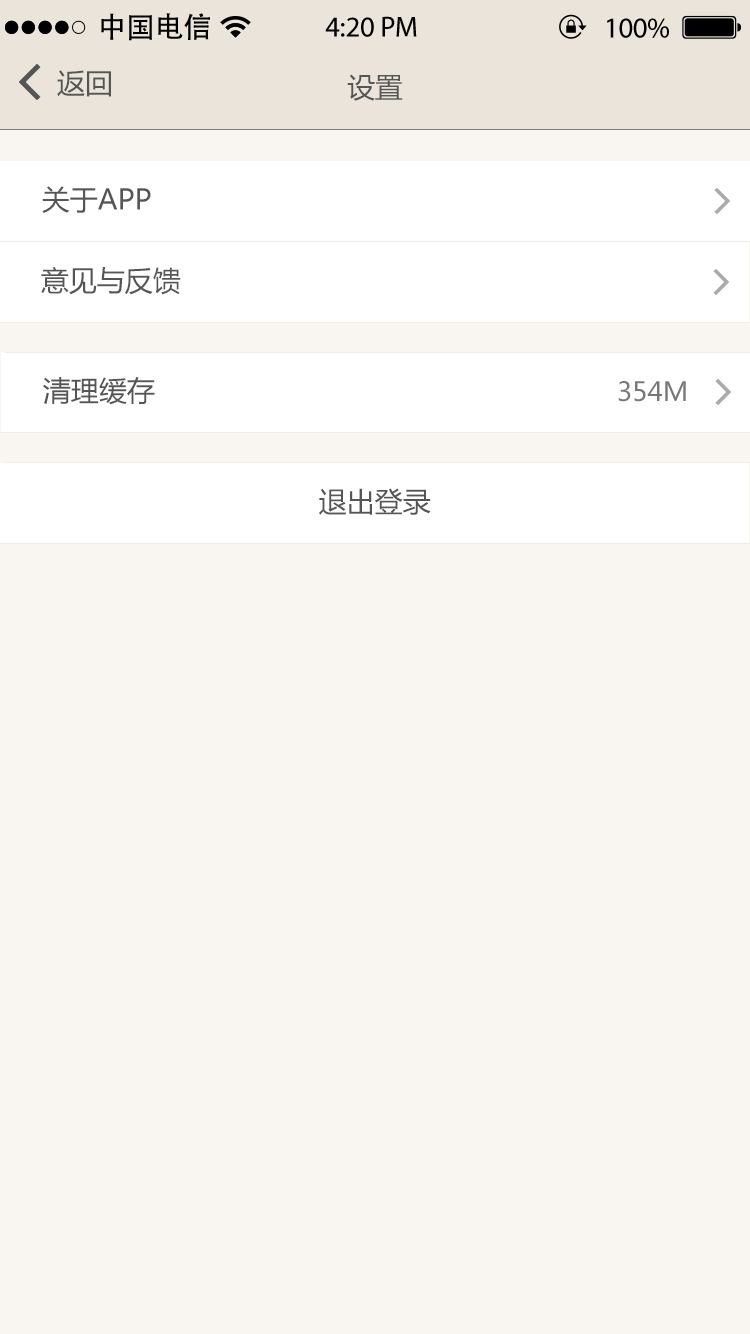
<style>
.page{position:relative;width:750px;height:1334px;background:#f9f5f1}
.page>*{position:absolute;margin:0}
.t1{font:28.8px "AdobeHeitiStd-Regular";color:#000000}
.t2{font:28.8px "MyriadPro-Regular";color:#000000}
.t3{font:28px "MicrosoftYaHei";color:#555555}
.t4{font:26px "MicrosoftYaHei";color:#777777}
</style>
<div class="page">
<p class="t1" style="left:101px;top:13px;width:109px;height:28px">中国电信</p>
<p class="t2" style="left:325px;top:16px;width:92px;height:21px">4:20 PM</p>
<p class="t2" style="left:607px;top:18px;width:62px;height:20px">100%</p>
<p class="t3" style="left:57px;top:70px;width:54px;height:27px">返回</p>
<p class="t3" style="left:347px;top:74px;width:56px;height:27px">设置</p>
<p class="t3" style="left:42px;top:186px;width:109px;height:27px">关于APP</p>
<p class="t3" style="left:41px;top:266px;width:140px;height:29px">意见与反馈</p>
<p class="t3" style="left:43px;top:377px;width:112px;height:28px">清理缓存</p>
<p class="t4" style="left:618px;top:381px;width:68px;height:21px">354M</p>
<p class="t3" style="left:319px;top:488px;width:112px;height:27px">退出登录</p>
</div>
